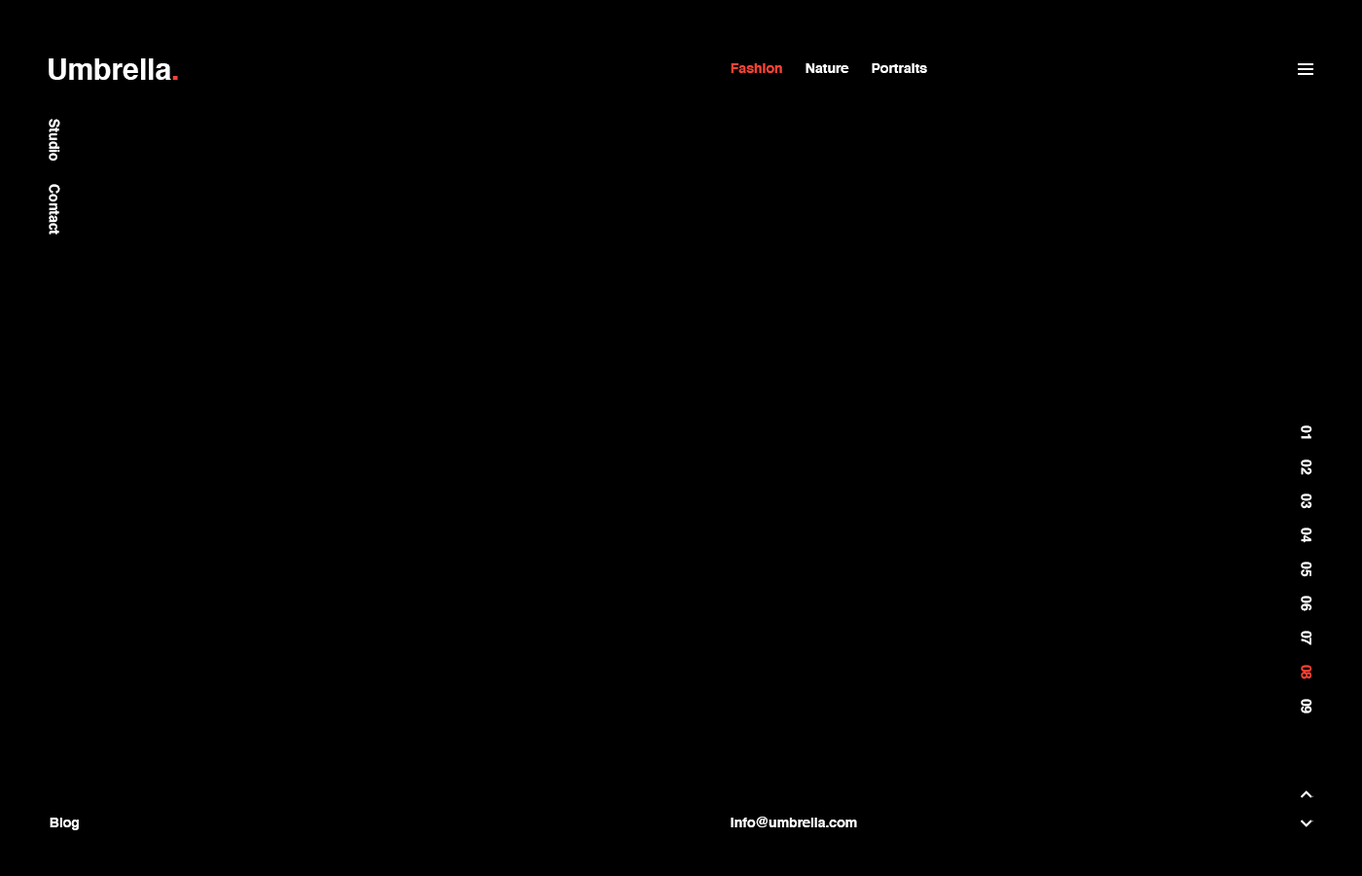
<style>
.page{position:relative;width:1362px;height:876px;background:#000000}
.page>*{position:absolute;margin:0}
.t1{font:29.2px "Helvetica-Bold";color:#ffffff}
.t2{font:29.2px "Helvetica-Bold";color:#f44336}
.t3{font:13.6px "Helvetica-Bold";color:#ffffff}
.t4{font:13.6px "Helvetica-Bold";color:#f44336}
</style>
<div class="page">
<p class="t1" style="left:49px;top:58px;width:129px;height:22px">Umbrella<span class="t2">.</span></p>
<p class="t3" style="left:731px;top:63px;width:196px;height:10px"><span class="t4">Fashion</span>      Nature      Portraits</p>
<p class="t3" style="left:49px;top:119px;width:11px;height:115px;rotate:90deg">Studio      Contact</p>
<p class="t3" style="left:1301px;top:425px;width:11px;height:288px;rotate:90deg">01     02     03     04     05     06     07<span class="t4">     08     </span>09</p>
<p class="t3" style="left:50px;top:817px;width:29px;height:13px">Blog</p>
<p class="t3" style="left:731px;top:816px;width:126px;height:11px">info@umbrella.com</p>
</div>
